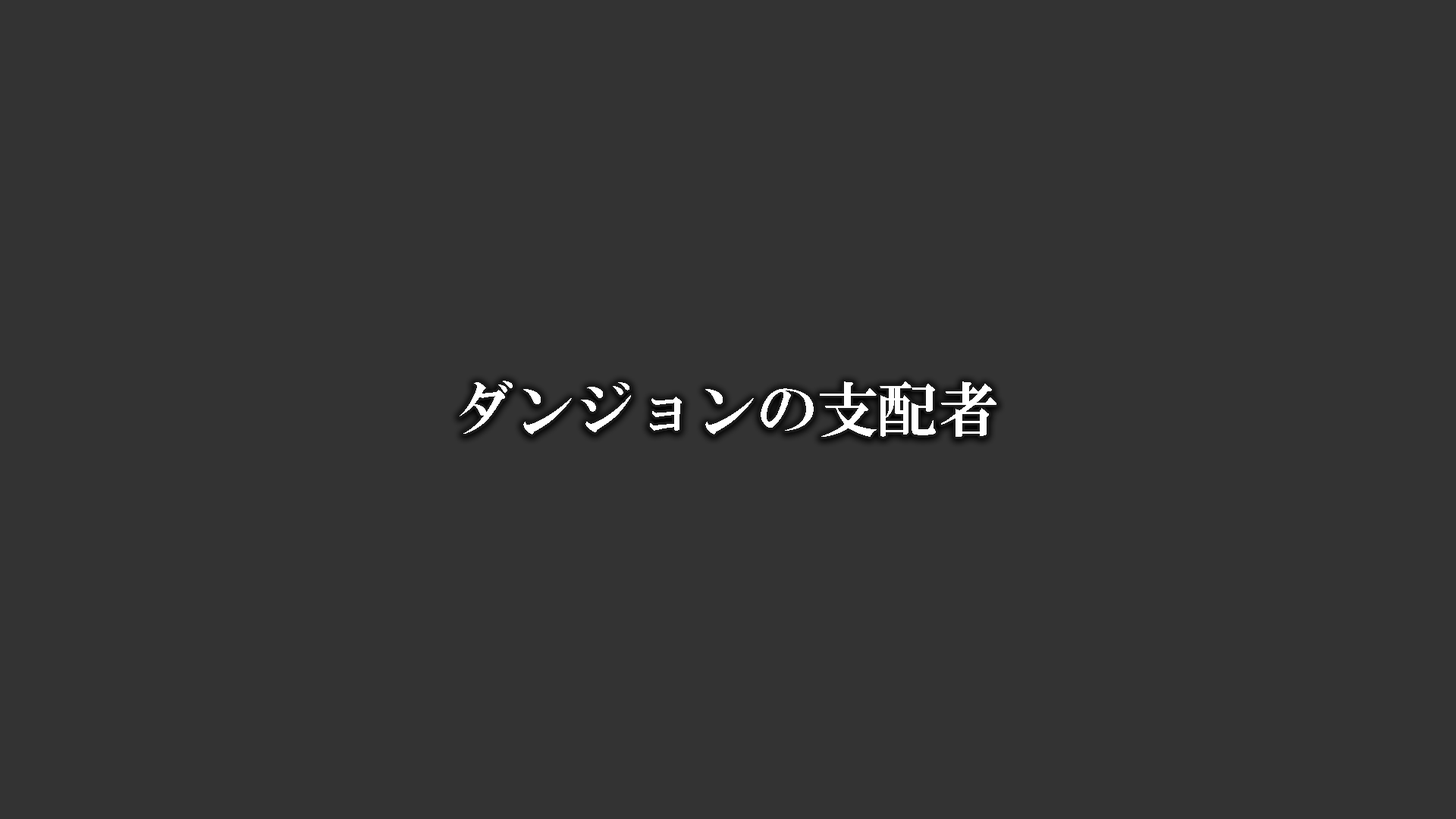
<style>
.page{position:relative;width:1456px;height:819px;background:#333333}
.page>*{position:absolute;margin:0}
.t1{font:60.7px "HGMinchoE";color:#ffffff}
</style>
<div class="page">
<p class="t1" style="left:460px;top:381px;width:536px;height:56px">ダンジョンの支配者</p>
</div>
